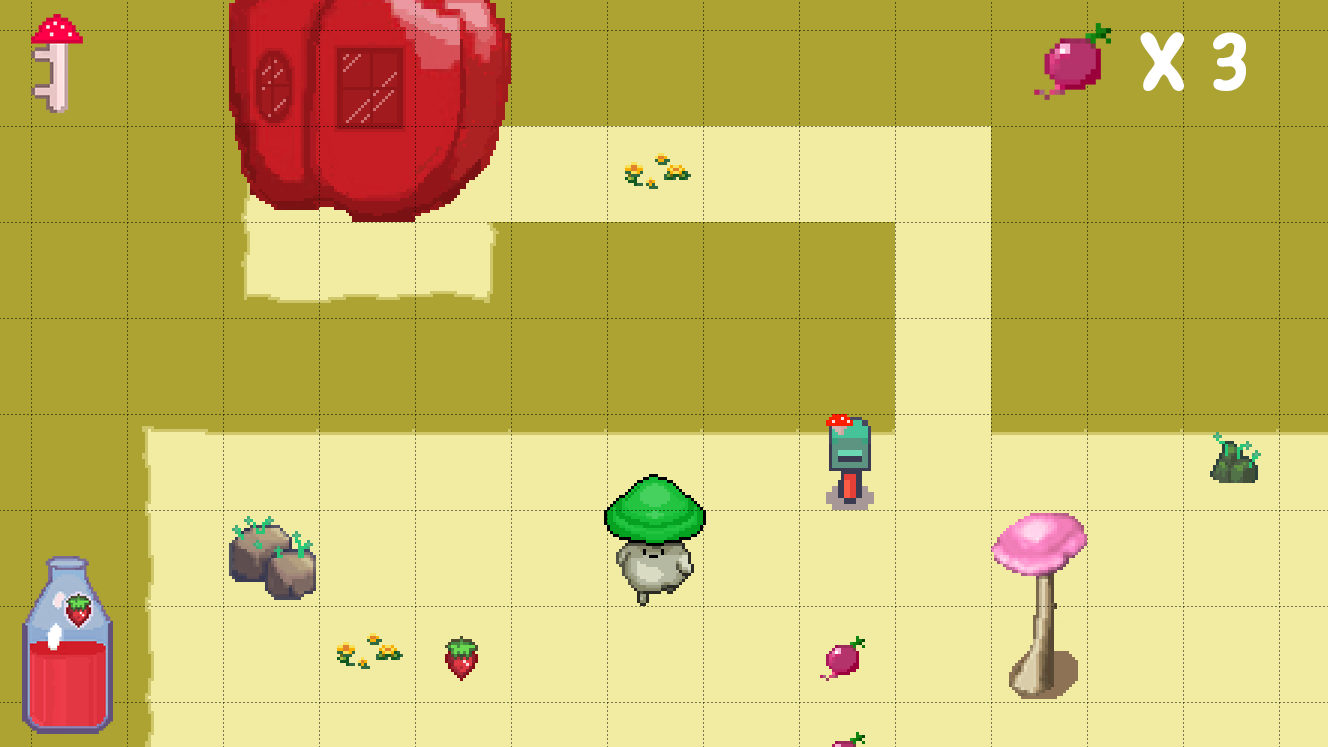
<style>
.page{position:relative;width:1328px;height:747px;background:#ada332}
.page>*{position:absolute;margin:0}
.t1{font:84px "MagicMushroom";color:#ffffff}
</style>
<div class="page">
<p class="t1" style="left:1140px;top:32px;width:106px;height:59px">X 3</p>
</div>
